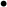
<style>
.page{position:relative;width:7px;height:7px;background:#000000}
.page>*{position:absolute;margin:0}
.t1{font:23px "ArialMT";color:#000000}
</style>
<div class="page">
<p class="t1" style="left:0px;top:0px;width:7px;height:7px">•</p>
</div>
